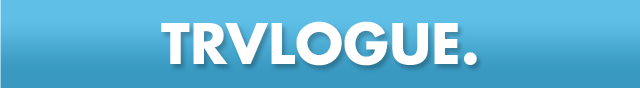
<style>
.page{position:relative;width:640px;height:88px;background:#5fbfe7}
.page>*{position:absolute;margin:0}
.t1{font:54.3px "Futura-Bold";color:#ffffff}
</style>
<div class="page">
<p class="t1" style="left:161px;top:21px;width:316px;height:45px">TRVLOGUE.</p>
</div>
